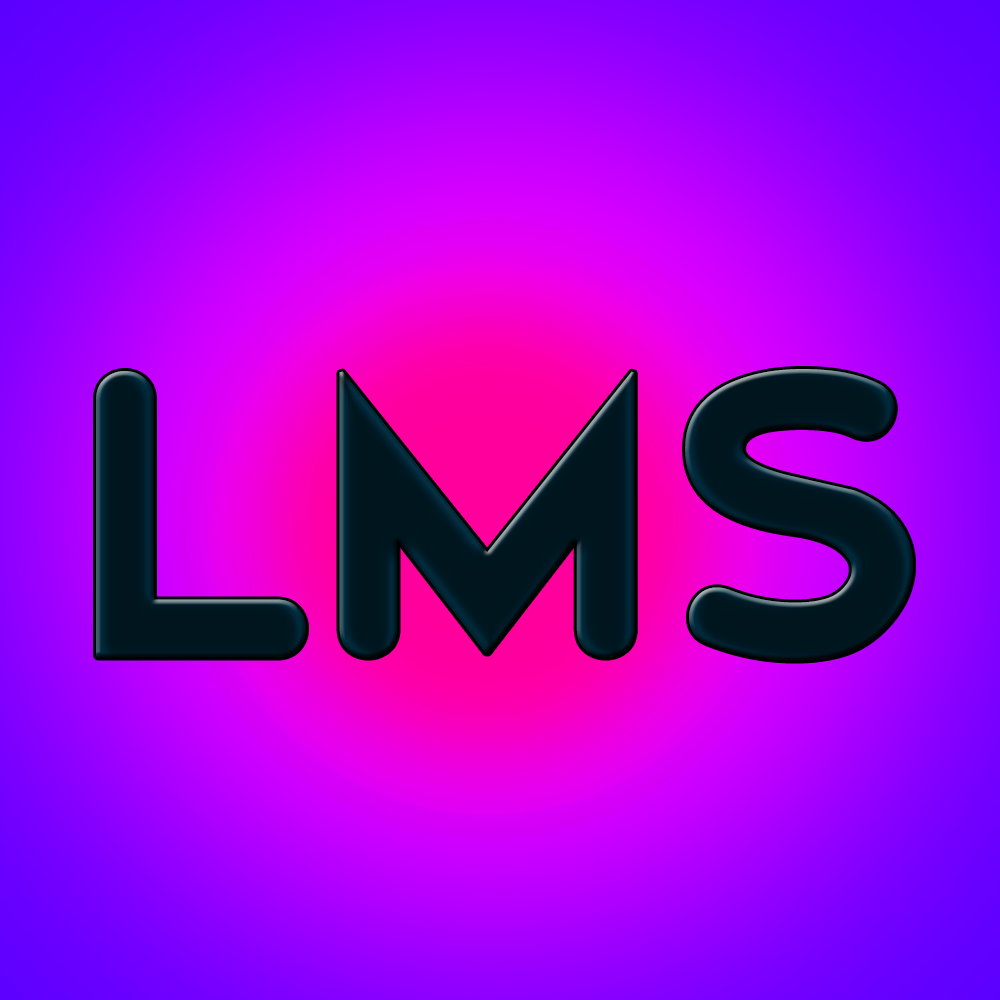
<style>
.page{position:relative;width:1000px;height:1000px}
.page>*{position:absolute;margin:0}
.t1{font:486.1px "20thCenturyFont";color:#00161f;font-weight:bold}
</style>
<div class="page">
<p class="t1" style="left:96px;top:369px;width:817px;height:292px">LMS</p>
</div>
